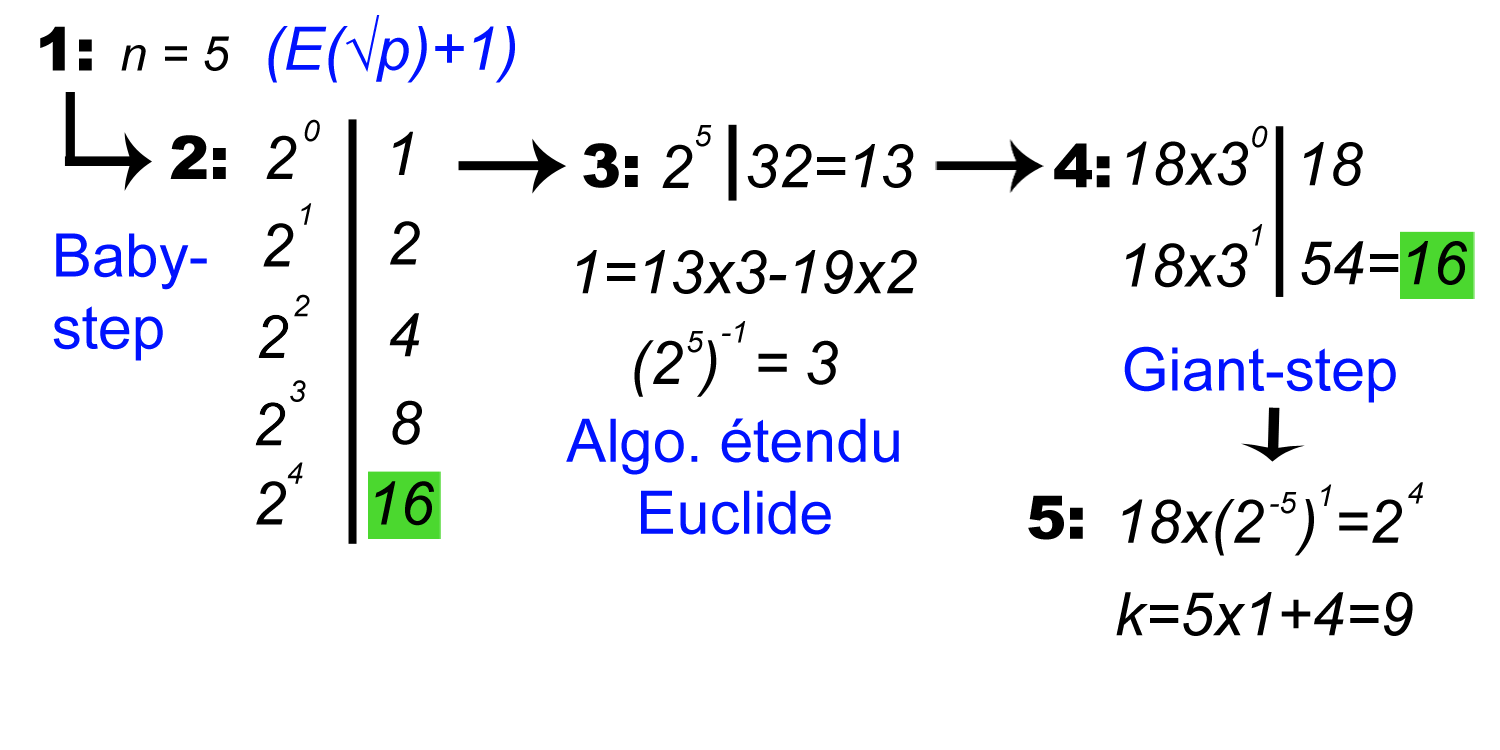
<style>
.page{position:relative;width:1500px;height:750px;background:#ffffff}
.page>*{position:absolute;margin:0}
.t1{font:60px "Arial-ItalicMT";color:#0012ff}
.t2{font:60px "Arial-Black";color:#000000}
.t3{font:48px "Arial-ItalicMT";color:#000000}
.t4{font:30px "Arial-ItalicMT";color:#000000}
.t5{font:60px "Arial-ItalicMT";color:#000000}
.t6{font:60px "ArialMT";color:#0012ff}
</style>
<div class="page">
<p class="t1" style="left:268px;top:15px;width:247px;height:68px">(E(√p)+1)</p>
<p class="t2" style="left:40px;top:26px;width:52px;height:45px">1:</p>
<p class="t3" style="left:121px;top:36px;width:108px;height:35px">n = 5</p>
<p class="t4" style="left:696px;top:125px;width:16px;height:22px">5</p>
<p class="t4" style="left:1252px;top:125px;width:16px;height:23px">0</p>
<p class="t2" style="left:170px;top:135px;width:56px;height:44px">2:</p>
<p class="t2" style="left:583px;top:143px;width:55px;height:45px">3:</p>
<p class="t5" style="left:662px;top:144px;width:31px;height:44px">2</p>
<p class="t5" style="left:747px;top:144px;width:167px;height:44px">32=13</p>
<p class="t2" style="left:1054px;top:143px;width:56px;height:45px">4:</p>
<p class="t5" style="left:1126px;top:141px;width:122px;height:45px">18x3</p>
<p class="t5" style="left:1304px;top:142px;width:59px;height:44px">18</p>
<p class="t6" style="left:53px;top:233px;width:154px;height:128px">Baby-<br>step</p>
<p class="t4" style="left:1252px;top:224px;width:11px;height:22px">1</p>
<p class="t5" style="left:1126px;top:243px;width:122px;height:45px">18x3</p>
<p class="t5" style="left:1301px;top:241px;width:166px;height:44px">54=16</p>
<p class="t5" style="left:577px;top:250px;width:340px;height:44px">1=13x3-19x2</p>
<p class="t4" style="left:722px;top:321px;width:24px;height:22px">-1</p>
<p class="t5" style="left:634px;top:340px;width:204px;height:57px">(2 )  = 3</p>
<p class="t4" style="left:687px;top:331px;width:16px;height:22px">5</p>
<p class="t6" style="left:1124px;top:346px;width:272px;height:57px">Giant-step</p>
<p class="t6" style="left:566px;top:418px;width:333px;height:117px;text-align:center">Algo. étendu<br>Euclide</p>
<p class="t4" style="left:1321px;top:484px;width:11px;height:22px">1</p>
<p class="t4" style="left:1408px;top:482px;width:15px;height:22px">4</p>
<p class="t2" style="left:1028px;top:495px;width:55px;height:45px">5:</p>
<p class="t4" style="left:1270px;top:492px;width:27px;height:22px">-5</p>
<p class="t5" style="left:1122px;top:499px;width:280px;height:57px">18x(2  ) =2</p>
<p class="t5" style="left:1116px;top:592px;width:297px;height:44px">k=5x1+4=9</p>
</div>
